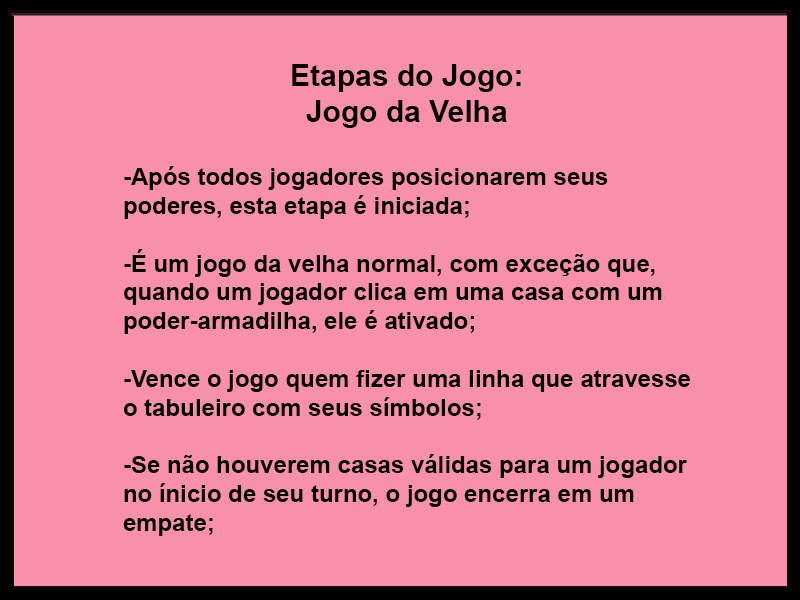
<style>
.page{position:relative;width:800px;height:600px;background:#f990aa}
.page>*{position:absolute;margin:0}
.t1{font:30px "Arial-BoldMT";color:#000000}
.t2{font:24px "Arial-BoldMT";color:#000000}
</style>
<div class="page">
<p class="t1" style="left:292px;top:64px;width:229px;height:64px;text-align:center">Etapas do Jogo: <br>Jogo da Velha</p>
<p class="t2" style="left:123px;top:166px;width:567px;height:370px">-Após todos jogadores posicionarem seus poderes, esta etapa é iniciada;<br><br>-É um jogo da velha normal, com exceção que, quando um jogador clica em uma casa com um poder-armadilha, ele é ativado;<br><br>-Vence o jogo quem fizer uma linha que atravesse o tabuleiro com seus símbolos;<br><br>-Se não houverem casas válidas para um jogador no ínicio de seu turno, o jogo encerra em um empate;</p>
</div>
